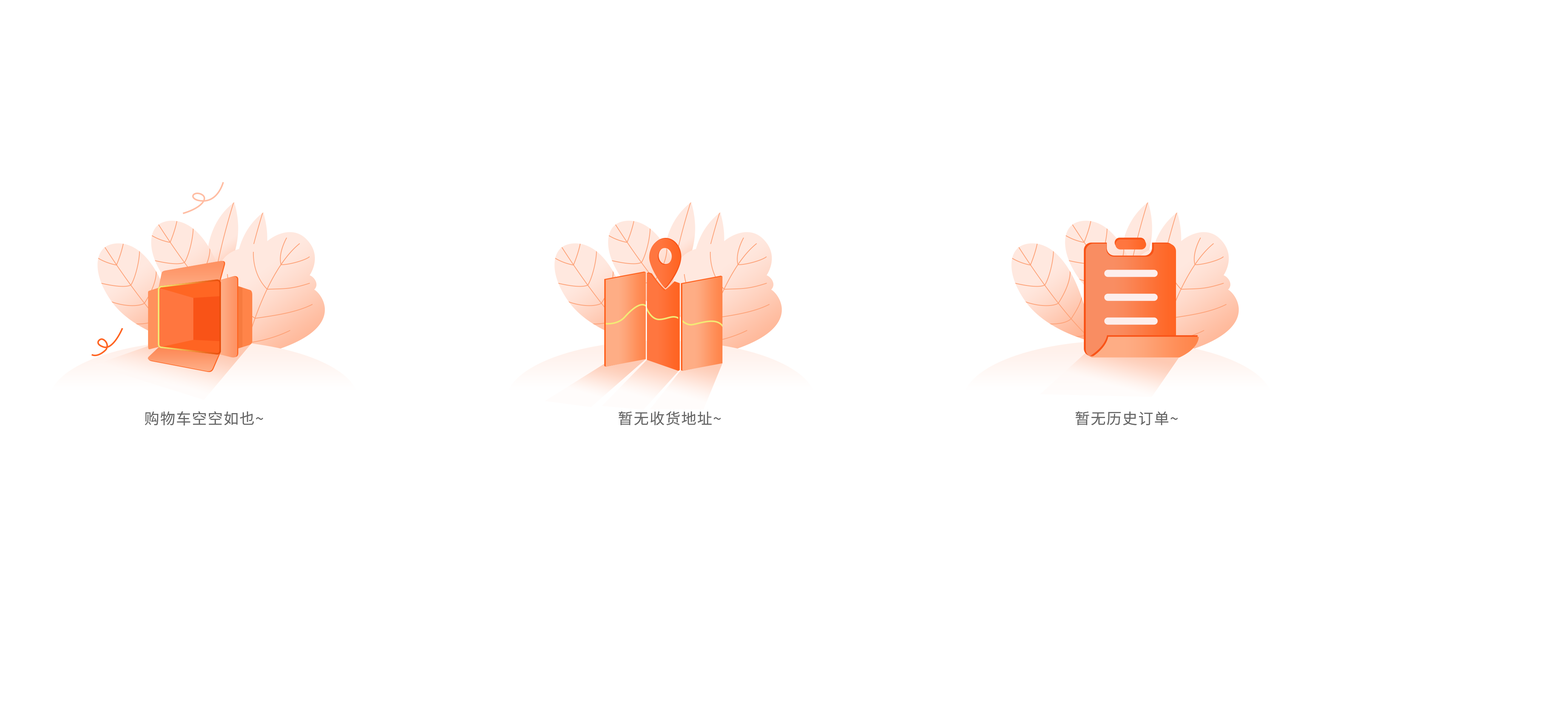
<style>
.page{position:relative;width:1568px;height:725px;background:#ffffff}
.page>*{position:absolute;margin:0}
.t1{font:15.1px "SourceHanSansCN-Regular";letter-spacing:0.05em;color:#666666}
</style>
<div class="page">
<p class="t1" style="left:145px;top:411px;width:118px;height:15px">购物车空空如也~</p>
<p class="t1" style="left:619px;top:411px;width:102px;height:14px">暂无收货地址~</p>
<p class="t1" style="left:1076px;top:411px;width:102px;height:14px">暂无历史订单~</p>
</div>
